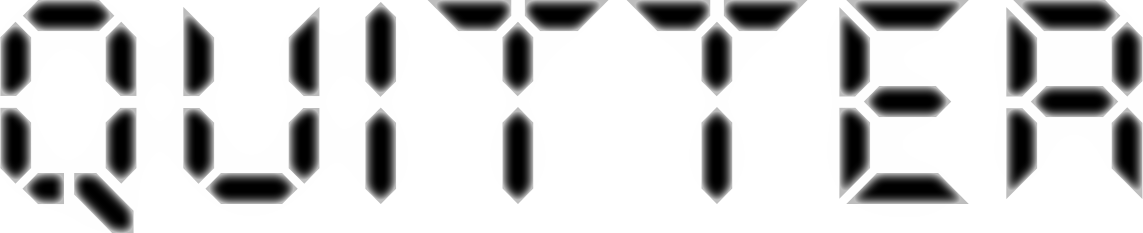
<style>
.page{position:relative;width:1143px;height:233px;background:#ffffff}
.page>*{position:absolute;margin:0}
.t1{font:291.7px "QuartzMS"}
</style>
<div class="page">
<p class="t1" style="left:0px;top:0px;width:1143px;height:233px">Quitter</p>
</div>
